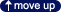
<style>
.page{position:relative;width:61px;height:12px;background:#04115b}
.page>*{position:absolute;margin:0}
.t1{font:11px "ArialMT";letter-spacing:-0.015em;color:#ffffff}
</style>
<div class="page">
<p class="t1" style="left:14px;top:3px;width:41px;height:9px">move up</p>
</div>
